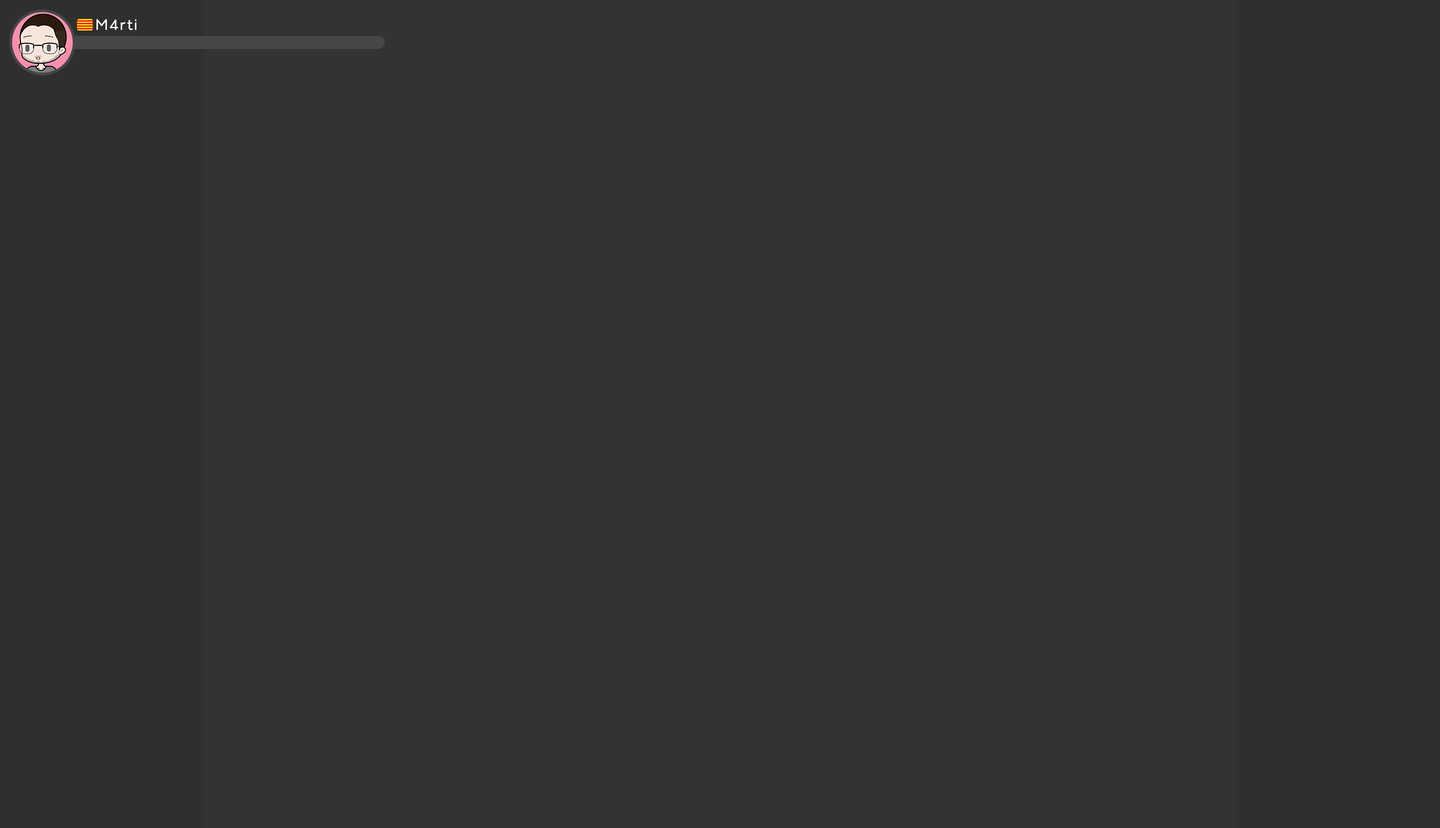
<style>
.page{position:relative;width:1440px;height:828px;background:#333333}
.page>*{position:absolute;margin:0}
.t1{font:15.8px "PollyRounded-Regular";color:#ffffff}
</style>
<div class="page">
<p class="t1" style="left:96px;top:19px;width:40px;height:11px">M4rti</p>
</div>
